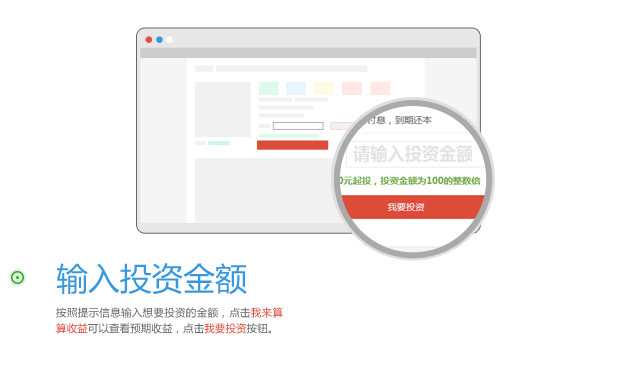
<style>
.page{position:relative;width:623px;height:389px;background:#ffffff}
.page>*{position:absolute;margin:0}
.t1{font:31.8px "MicrosoftYaHei";color:#3798db}
.t2{font:10.6px/15.9px "MicrosoftYaHei";color:#666666}
.t3{font:10.6px/15.9px "MicrosoftYaHei";color:#dd4b39}
</style>
<div class="page">
<p class="t1" style="left:56px;top:263px;width:191px;height:32px">输入投资金额</p>
<p class="t2" style="left:56px;top:307px;width:227px;height:27px;text-align:justify">按照提示信息输入想要投资的金额，点击<span class="t3">我来算算收益</span>可以查看预期收益，点击<span class="t3">我要投资</span>按钮。</p>
</div>
